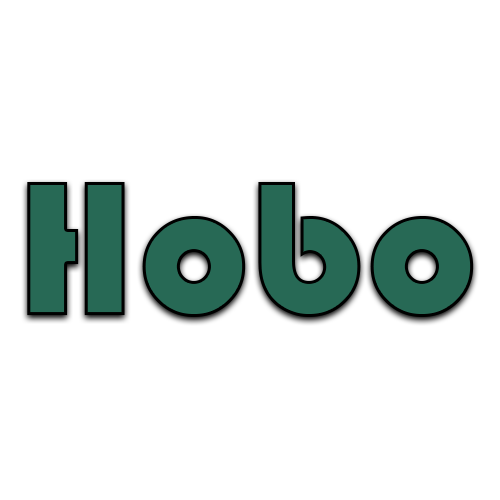
<style>
.page{position:relative;width:500px;height:500px;background:#ffffff}
.page>*{position:absolute;margin:0}
.t1{font:200px "Bauhaus93";color:#276955}
</style>
<div class="page">
<p class="t1" style="left:27px;top:182px;width:447px;height:135px">Hobo</p>
</div>
